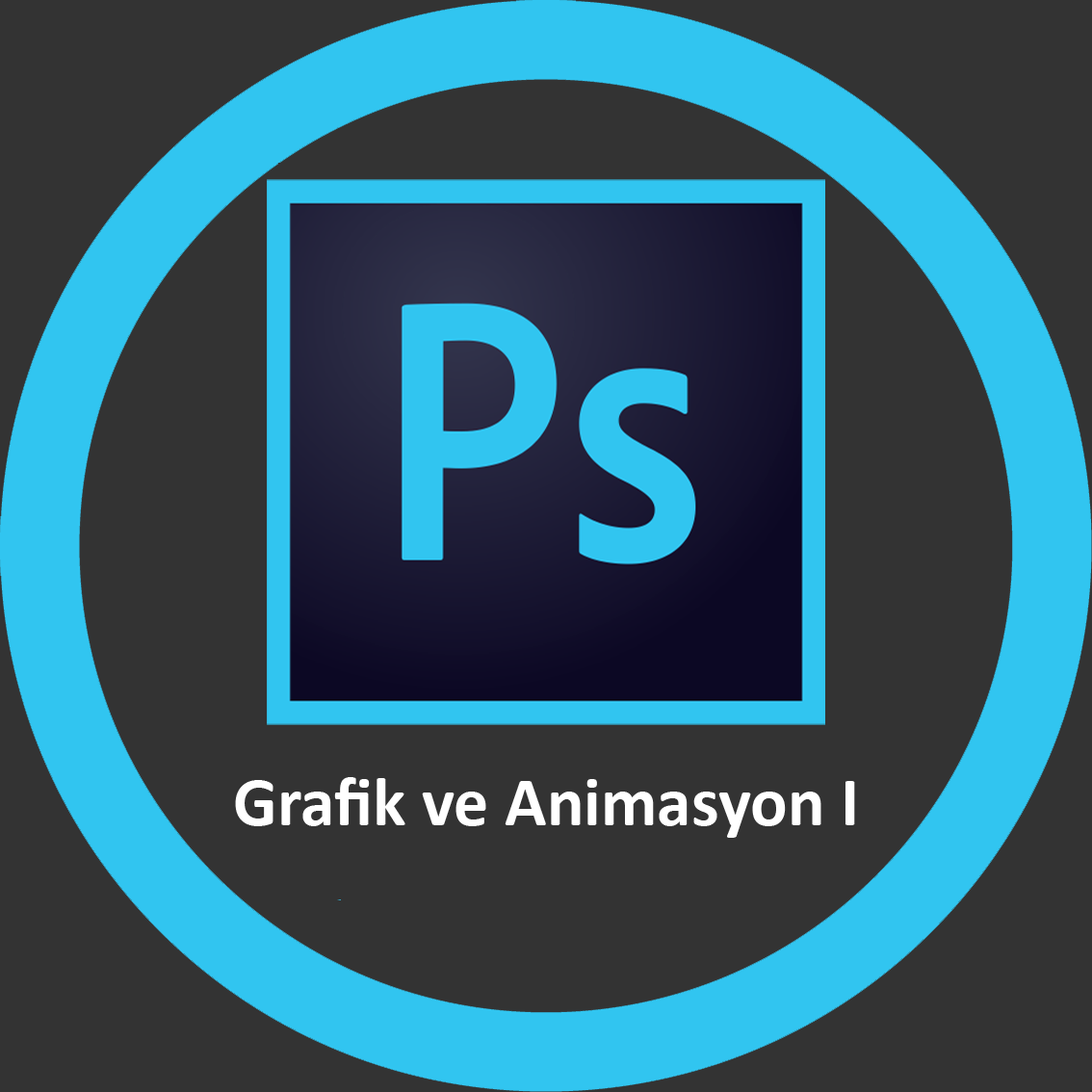
<style>
.page{position:relative;width:1092px;height:1092px;background:#333333}
.page>*{position:absolute;margin:0}
.t1{font:69.3px "Calibri-Bold";color:#ffffff}
</style>
<div class="page">
<p class="t1" style="left:235px;top:777px;width:620px;height:61px">Grafik ve Animasyon I</p>
</div>
